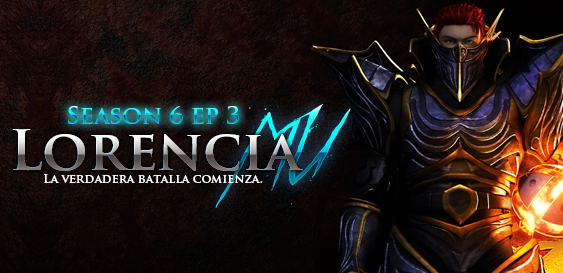
<style>
.page{position:relative;width:563px;height:273px}
.page>*{position:absolute;margin:0}
.t1{font:24px "TrajanPro-Bold"}
.t2{font:115px "aThemeformurder"}
.t3{font:55px "TrajanPro-Bold"}
.t4{font:12px "TrajanPro-Bold";color:#ffffff}
</style>
<div class="page">
<p class="t1" style="left:68px;top:106px;width:171px;height:18px">Season 6 ep 3</p>
<p class="t2" style="left:215px;top:104px;width:136px;height:104px">MU</p>
<p class="t3" style="left:12px;top:129px;width:291px;height:42px">Lorencia</p>
<p class="t4" style="left:44px;top:174px;width:218px;height:9px">La verdadera batalla comienza.</p>
</div>
